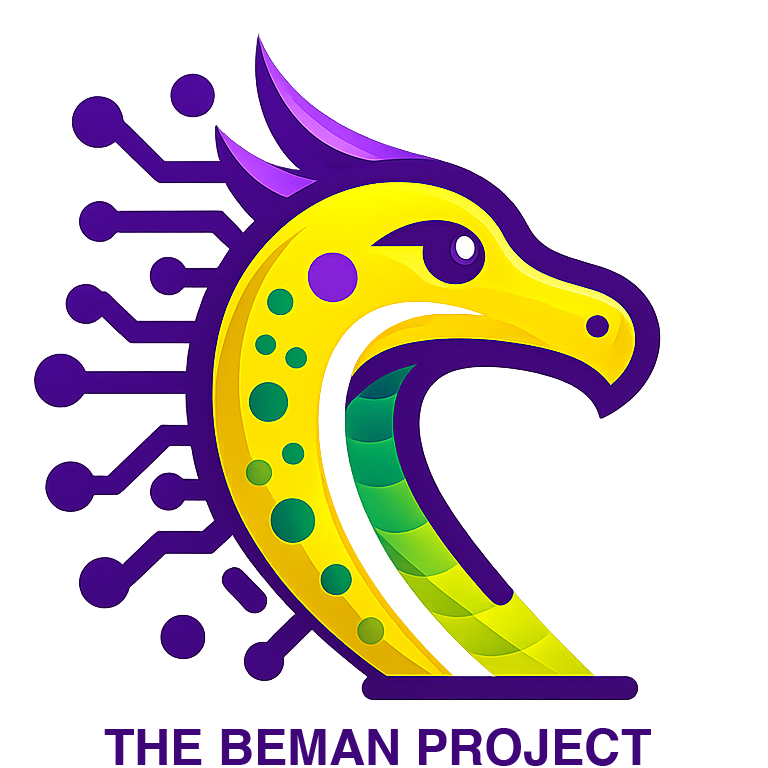
<style>
.page{position:relative;width:768px;height:768px;background:#ffffff}
.page>*{position:absolute;margin:0}
.t1{font:50px "Helvetica-Bold";color:#3e0678}
</style>
<div class="page">
<p class="t1" style="left:104px;top:728px;width:547px;height:38px">THE BEMAN PROJECT</p>
</div>
